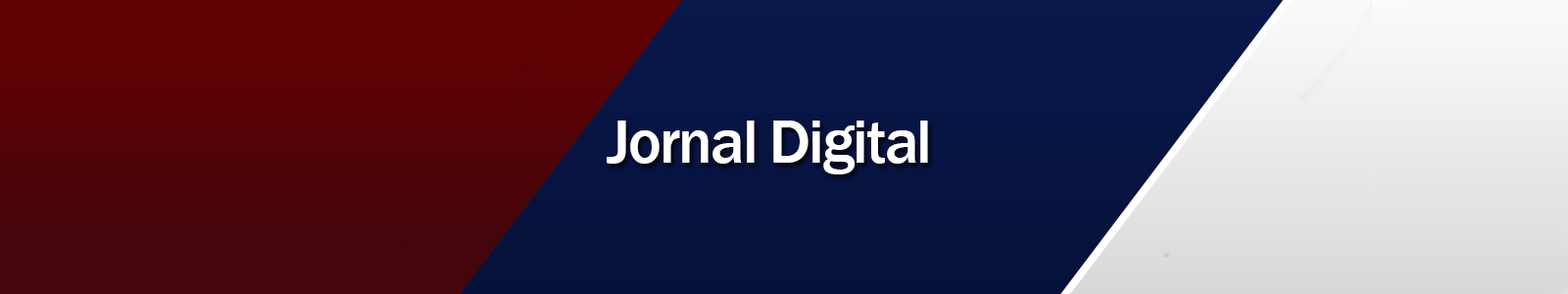
<style>
.page{position:relative;width:1568px;height:294px}
.page>*{position:absolute;margin:0}
.t1{font:62.6px "FranklinGothic-Medium";letter-spacing:-0.03em;color:#ffffff}
</style>
<div class="page">
<p class="t1" style="left:607px;top:121px;width:321px;height:53px">Jornal Digital</p>
</div>
